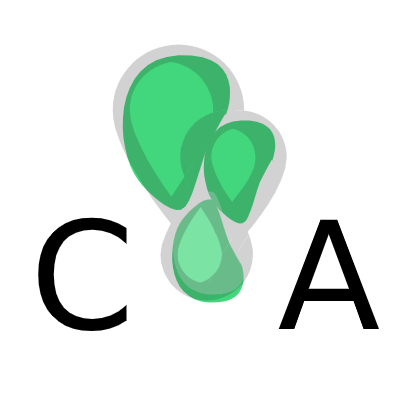
<style>
.page{position:relative;width:400px;height:400px;background:#ffffff}
.page>*{position:absolute;margin:0}
.t1{font:150px "DejaVuSans";color:#000000}
</style>
<div class="page">
<p class="t1" style="left:38px;top:217px;width:341px;height:115px">C   A</p>
</div>
